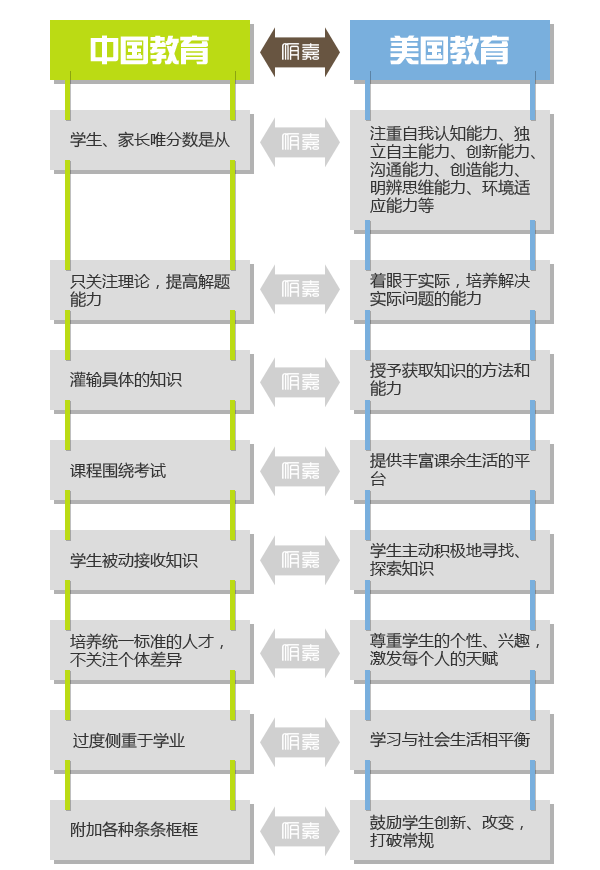
<style>
.page{position:relative;width:600px;height:870px;background:#ffffff}
.page>*{position:absolute;margin:0}
.t1{font:30px "SingYiEG-Ultra-GB";color:#ffffff}
.t2{font:16px/18px "MicrosoftYaHei";color:#333333}
.t3{font:16px "MicrosoftYaHei";color:#333333}
</style>
<div class="page">
<p class="t1" style="left:90px;top:35px;width:119px;height:30px">中国教育</p>
<p class="t1" style="left:390px;top:35px;width:119px;height:30px">美国教育</p>
<p class="t2" style="left:370px;top:125px;width:165px;height:89px">注重自我认知能力、独<br>立自主能力、创新能力、<br>沟通能力、创造能力、<br>明辨思维能力、环境适<br>应能力等</p>
<p class="t3" style="left:70px;top:131px;width:160px;height:17px">学生、家长唯分数是从</p>
<p class="t2" style="left:70px;top:273px;width:160px;height:34px">只关注理论，提高解题<br>能力</p>
<p class="t2" style="left:370px;top:272px;width:160px;height:35px">着眼于实际，培养解决<br>实际问题的能力</p>
<p class="t2" style="left:370px;top:362px;width:160px;height:34px">授予获取知识的方法和<br>能力</p>
<p class="t3" style="left:70px;top:371px;width:112px;height:17px">灌输具体的知识</p>
<p class="t3" style="left:70px;top:462px;width:96px;height:17px">课程围绕考试</p>
<p class="t2" style="left:370px;top:452px;width:160px;height:34px">提供丰富课余生活的平<br>台</p>
<p class="t2" style="left:370px;top:542px;width:149px;height:34px">学生主动积极地寻找、<br>探索知识</p>
<p class="t3" style="left:70px;top:552px;width:128px;height:17px">学生被动接收知识</p>
<p class="t2" style="left:70px;top:633px;width:153px;height:34px">培养统一标准的人才，<br>不关注个体差异</p>
<p class="t2" style="left:370px;top:632px;width:169px;height:34px">尊重学生的个性、兴趣，<br>激发每个人的天赋</p>
<p class="t3" style="left:73px;top:732px;width:112px;height:17px">过度侧重于学业</p>
<p class="t3" style="left:370px;top:731px;width:160px;height:17px">学习与社会生活相平衡</p>
<p class="t3" style="left:71px;top:821px;width:127px;height:17px">附加各种条条框框</p>
<p class="t2" style="left:370px;top:814px;width:153px;height:34px">鼓励学生创新、改变，<br>打破常规</p>
</div>
